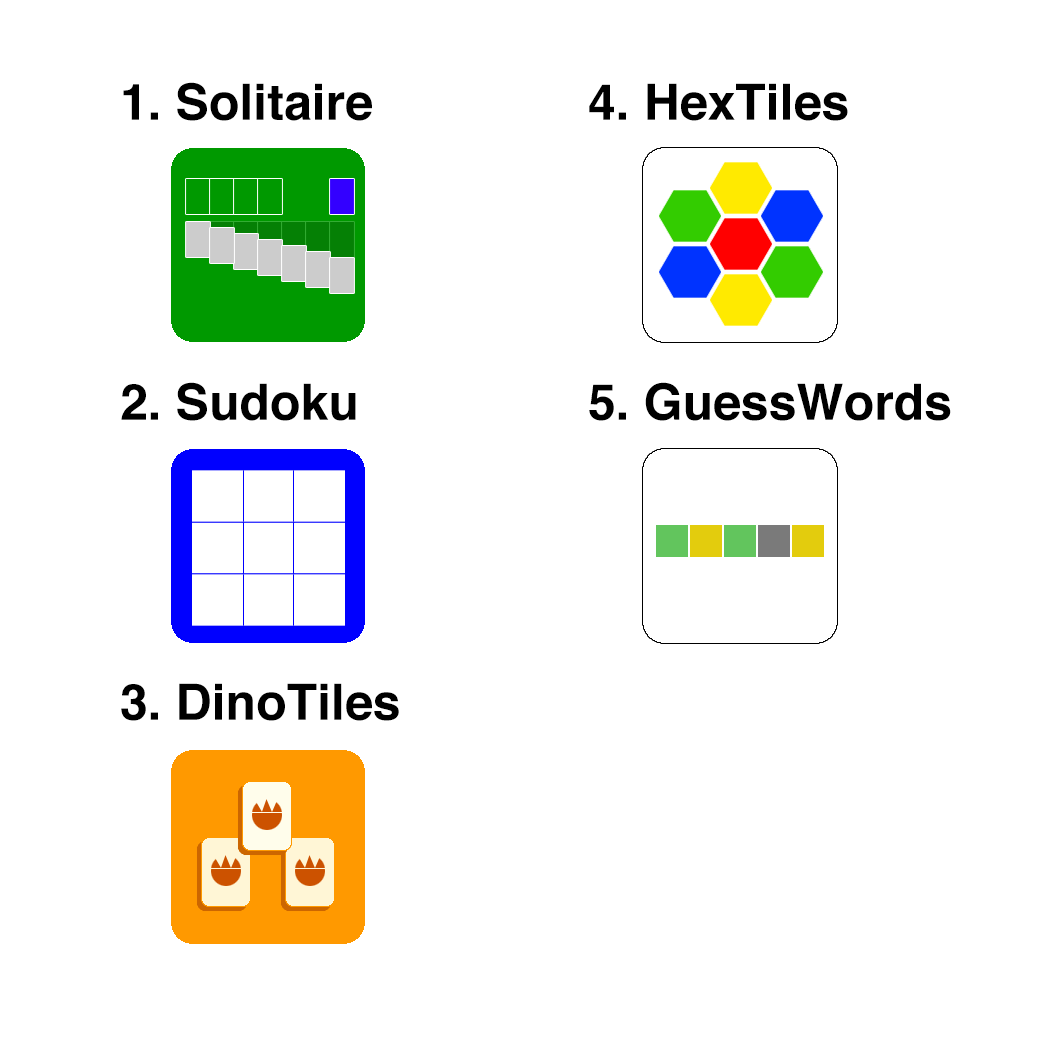
<style>
.page{position:relative;width:1040px;height:1040px;background:#ffffff}
.page>*{position:absolute;margin:0}
.t1{font:50px "Helvetica-Bold";color:#000000}
</style>
<div class="page">
<p class="t1" style="left:121px;top:82px;width:830px;height:639px">1. Solitaire      4. HexTiles<br><br><br><br><br>2. Sudoku       5. GuessWords<br><br><br><br><br>3. DinoTiles</p>
</div>
